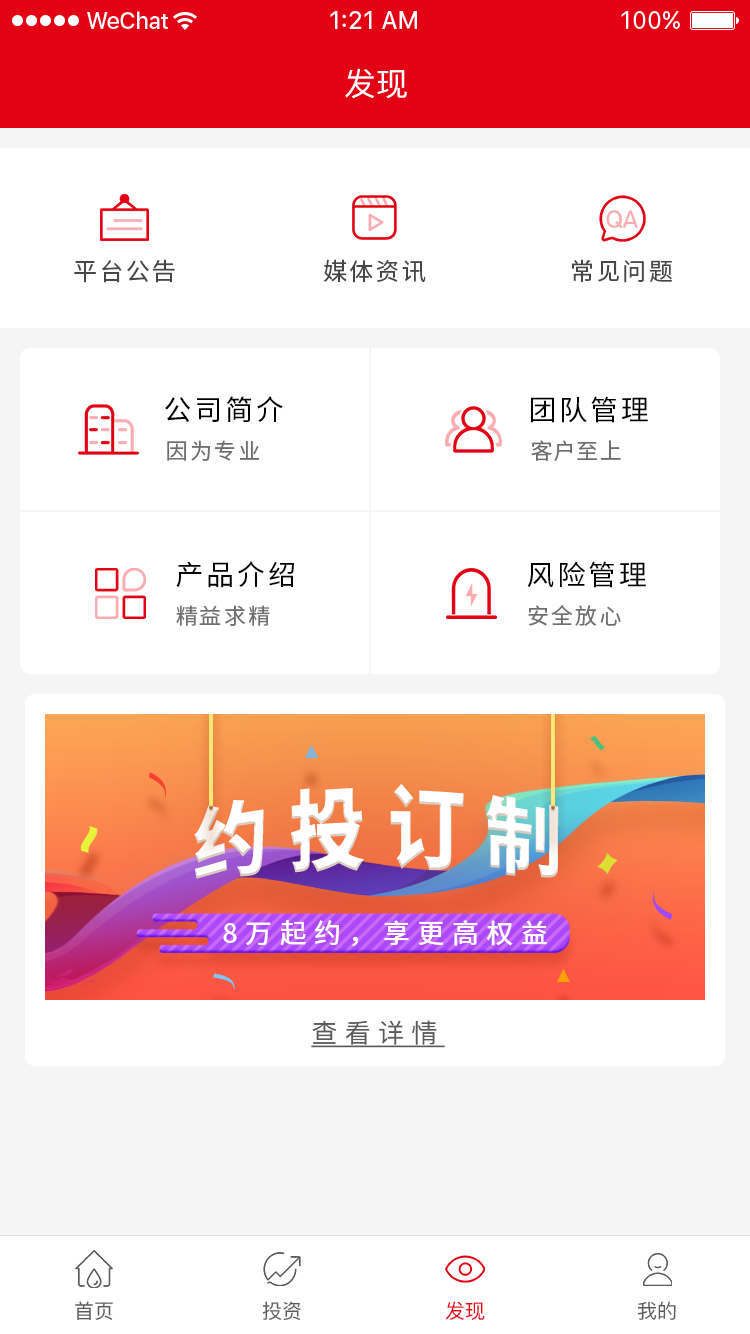
<style>
.page{position:relative;width:750px;height:1334px;background:#ffffff}
.page>*{position:absolute;margin:0}
.t1{font:32px "PingFang-SC-Medium";color:#ffffff}
.t2{font:24px "SourceHanSansCN-Regular";letter-spacing:0.1em;color:#464646}
.t3{font:28px "SourceHanSansCN-Regular";letter-spacing:0.1em;color:#000000}
.t4{font:22px "SourceHanSansCN-Regular";letter-spacing:0.1em;color:#6e6e6e}
.t5{font:22px "SourceHanSansCN-Regular";letter-spacing:0.04em;color:#6e6e6e}
.t6{font:26px "PingFang-SC-Medium";letter-spacing:0.28em;color:#5a5a5a;text-decoration:underline}
.t7{font:20px "PingFang-SC-Medium";color:#5a5a5a}
.t8{font:20px "PingFang-SC-Medium";color:#e20214}
</style>
<div class="page">
<p class="t1" style="left:345px;top:68px;width:62px;height:31px">发现</p>
<p class="t2" style="left:74px;top:259px;width:101px;height:24px">平台公告</p>
<p class="t2" style="left:323px;top:259px;width:103px;height:24px">媒体资讯</p>
<p class="t2" style="left:572px;top:259px;width:100px;height:24px">常见问题</p>
<p class="t3" style="left:165px;top:396px;width:118px;height:26px">公司简介</p>
<p class="t3" style="left:531px;top:396px;width:117px;height:27px">团队管理</p>
<p class="t4" style="left:167px;top:440px;width:92px;height:21px">因为专业</p>
<p class="t5" style="left:531px;top:440px;width:90px;height:21px">客户至上</p>
<p class="t3" style="left:176px;top:561px;width:118px;height:27px">产品介绍</p>
<p class="t3" style="left:527px;top:561px;width:119px;height:27px">风险管理</p>
<p class="t4" style="left:176px;top:605px;width:94px;height:21px">精益求精</p>
<p class="t4" style="left:528px;top:605px;width:93px;height:21px">安全放心</p>
<p class="t6" style="left:311px;top:1020px;width:134px;height:28px">查看详情</p>
<p class="t7" style="left:75px;top:1301px;width:38px;height:19px">首页</p>
<p class="t7" style="left:262px;top:1301px;width:39px;height:20px">投资</p>
<p class="t8" style="left:445px;top:1301px;width:40px;height:19px">发现</p>
<p class="t7" style="left:637px;top:1301px;width:39px;height:19px">我的</p>
</div>
